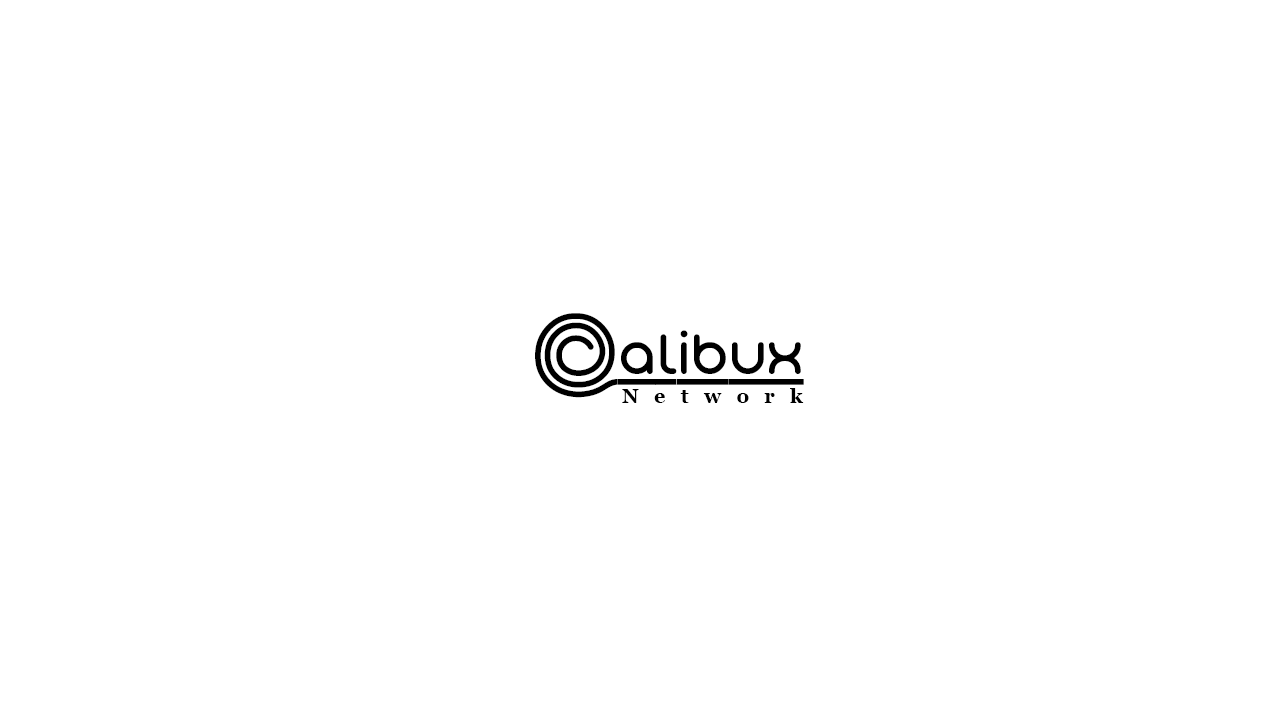
<style>
.page{position:relative;width:1280px;height:720px;background:#ffffff}
.page>*{position:absolute;margin:0}
.t1{font:60px "AtTheMiddayUnderlineDemo";color:#000000}
.t2{font:20px "Georgia-Bold";color:#000000}
</style>
<div class="page">
<p class="t1" style="left:535px;top:313px;width:269px;height:85px">Calibux</p>
<p class="t2" style="left:622px;top:388px;width:182px;height:15px">N   e   t   w   o   r   k</p>
</div>
